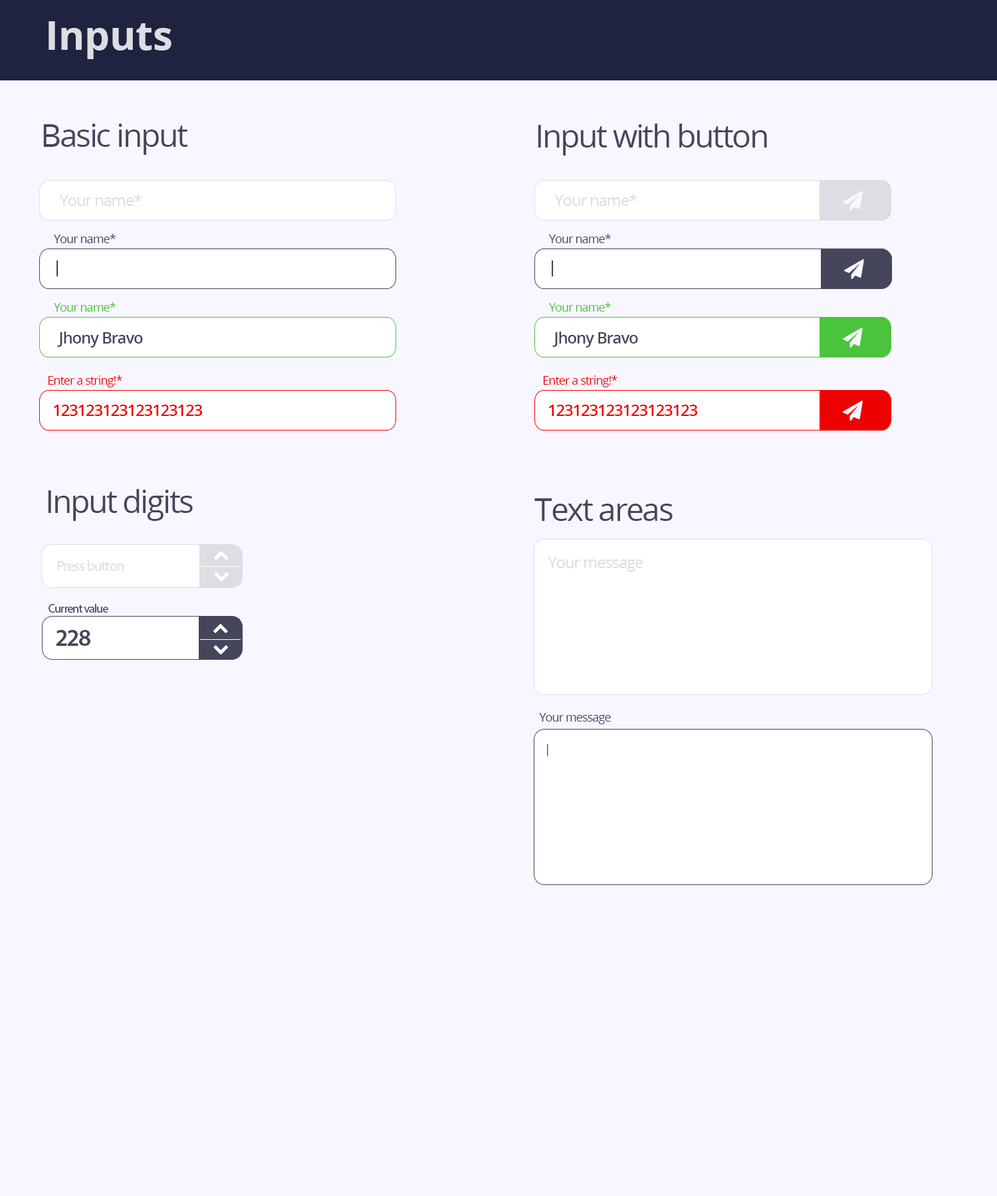
<style>
.page{position:relative;width:997px;height:1196px;background:#f8f7ff}
.page>*{position:absolute;margin:0}
.t1{font:39.9px "OpenSans-Bold";color:#dedde3}
.t2{font:31.9px "OpenSans";letter-spacing:-0.05em;color:#45465b}
.t3{font:15.9px "OpenSans";letter-spacing:-0.05em;color:#dedde3}
.t4{font:12px "OpenSans";letter-spacing:-0.05em;color:#45465b}
.t5{font:15.9px "OpenSans-Semibold";letter-spacing:-0.05em;color:#45465b}
.t6{font:12px "OpenSans";letter-spacing:-0.05em;color:#4ac43d}
.t7{font:12px "OpenSans";letter-spacing:-0.05em;color:#ed0101}
.t8{font:15.9px "OpenSans-Semibold";letter-spacing:-0.05em;color:#ed0101}
.t9{font:14.6px "MyriadPro-Regular";letter-spacing:-0.05em;color:#dedde3}
.t10{font:12px "MyriadPro-Regular";letter-spacing:-0.05em;color:#45465b}
.t11{font:23.9px "MyriadPro-Semibold";letter-spacing:-0.05em;color:#45465b}
</style>
<div class="page">
<p class="t1" style="left:49px;top:21px;width:122px;height:38px">Inputs</p>
<p class="t2" style="left:43px;top:124px;width:144px;height:31px">Basic input</p>
<p class="t2" style="left:538px;top:124px;width:229px;height:32px">Input with button</p>
<p class="t3" style="left:59px;top:194px;width:83px;height:12px">Your name*</p>
<p class="t3" style="left:554px;top:194px;width:83px;height:12px">Your name*</p>
<p class="t4" style="left:54px;top:234px;width:62px;height:9px">Your name*</p>
<p class="t4" style="left:549px;top:234px;width:62px;height:9px">Your name*</p>
<p class="t5" style="left:56px;top:261px;width:2px;height:15px">|</p>
<p class="t5" style="left:552px;top:261px;width:2px;height:15px">|</p>
<p class="t6" style="left:54px;top:302px;width:62px;height:10px">Your name*</p>
<p class="t6" style="left:549px;top:302px;width:62px;height:10px">Your name*</p>
<p class="t5" style="left:57px;top:332px;width:86px;height:16px">Jhony Bravo</p>
<p class="t5" style="left:552px;top:332px;width:86px;height:16px">Jhony Bravo</p>
<p class="t7" style="left:48px;top:375px;width:74px;height:12px">Enter a string!*</p>
<p class="t7" style="left:543px;top:375px;width:74px;height:12px">Enter a string!*</p>
<p class="t8" style="left:53px;top:405px;width:149px;height:11px">123123123123123123</p>
<p class="t8" style="left:548px;top:405px;width:149px;height:11px">123123123123123123</p>
<p class="t2" style="left:48px;top:489px;width:145px;height:32px">Input digits</p>
<p class="t2" style="left:534px;top:498px;width:139px;height:23px">Text areas</p>
<p class="t3" style="left:548px;top:557px;width:95px;height:15px">Your message</p>
<p class="t9" style="left:57px;top:560px;width:67px;height:11px">Press button</p>
<p class="t10" style="left:49px;top:604px;width:59px;height:9px">Current value</p>
<p class="t11" style="left:56px;top:630px;width:34px;height:16px">228</p>
<p class="t4" style="left:539px;top:713px;width:72px;height:11px">Your message</p>
<p class="t4" style="left:547px;top:744px;width:1px;height:12px">|</p>
</div>
